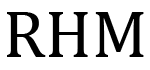
<style>
.page{position:relative;width:150px;height:70px;background:#ffffff}
.page>*{position:absolute;margin:0}
.t1{font:68px "CambriaMath";color:#000000}
</style>
<div class="page">
<p class="t1" style="left:7px;top:12px;width:137px;height:45px">RHM</p>
</div>
